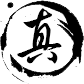
<style>
.page{position:relative;width:84px;height:84px;background:#ffffff}
.page>*{position:absolute;margin:0}
.t1{font:61.3px "STXingkai";color:#000000}
</style>
<div class="page">
<p class="t1" style="left:17px;top:8px;width:45px;height:56px">真</p>
</div>
